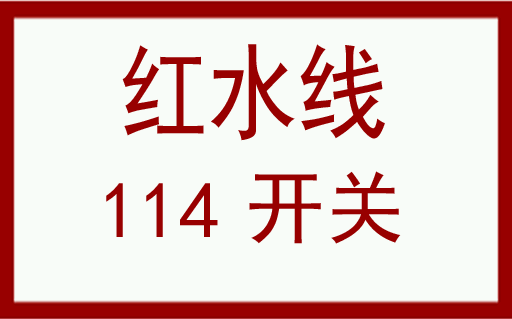
<style>
.page{position:relative;width:512px;height:319px;background:#f8fcf8}
.page>*{position:absolute;margin:0}
.t1{font:104.7px "SimHei";color:#980000;scale:0.85 1}
.t2{font:80.2px "SimHei";color:#980000}
</style>
<div class="page">
<p class="t1" style="left:122px;top:44px;width:263px;height:97px">红水线</p>
<p class="t2" style="left:249px;top:171px;width:152px;height:73px">开关</p>
<p class="t2" style="left:106px;top:183px;width:112px;height:54px">114</p>
</div>
